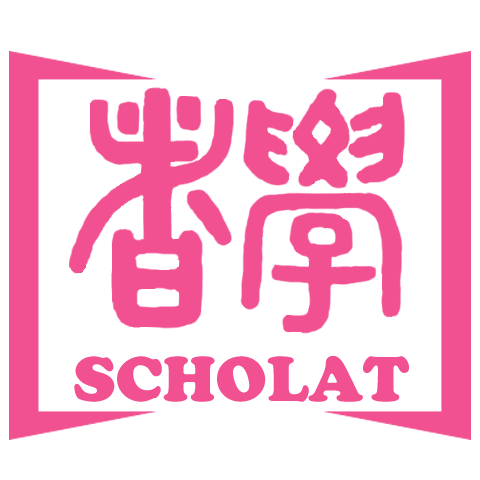
<style>
.page{position:relative;width:480px;height:480px;background:#ffffff}
.page>*{position:absolute;margin:0}
.t1{font:62.7px "CooperBlackStd";color:#f15191}
</style>
<div class="page">
<p class="t1" style="left:74px;top:356px;width:335px;height:46px">SCHOLAT</p>
</div>
